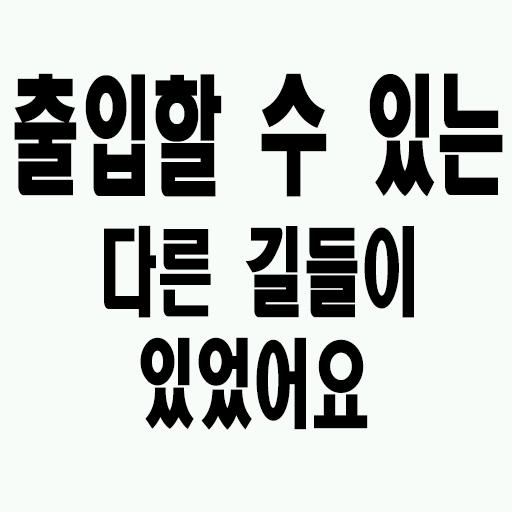
<style>
.page{position:relative;width:512px;height:512px;background:#f8fcf8}
.page>*{position:absolute;margin:0}
.t1{font:127.8px "HeadlineR-HM";color:#000000;scale:0.56 1}
.t2{font:95.4px "HeadlineR-HM";color:#000000;scale:0.61 1}
</style>
<div class="page">
<p class="t1" style="left:14px;top:73px;width:489px;height:124px">출입할 수 있는</p>
<p class="t2" style="left:104px;top:225px;width:310px;height:93px">다른 길들이</p>
<p class="t2" style="left:140px;top:337px;width:228px;height:93px">있었어요</p>
</div>
